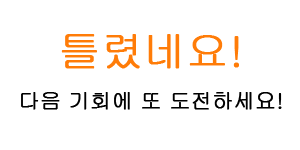
<style>
.page{position:relative;width:300px;height:150px;background:#ffffff}
.page>*{position:absolute;margin:0}
.t1{font:41.7px "Gulim";color:#ff7c08;font-weight:bold}
.t2{font:20.8px "Gulim";color:#000000;font-weight:bold}
</style>
<div class="page">
<p class="t1" style="left:61px;top:34px;width:178px;height:35px">틀렸네요!</p>
<p class="t2" style="left:21px;top:92px;width:261px;height:18px">다음 기회에 또 도전하세요!</p>
</div>
